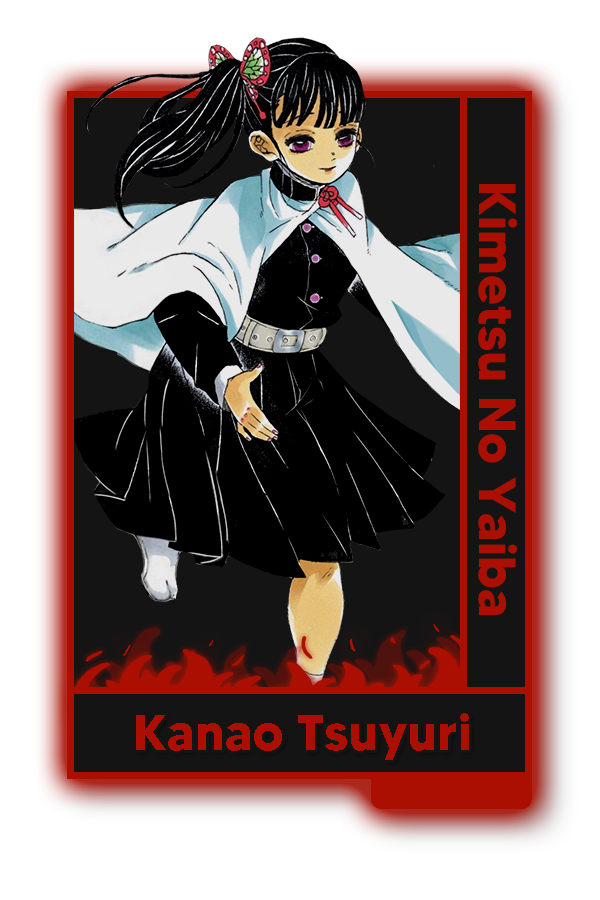
<style>
.page{position:relative;width:600px;height:900px;background:#141414}
.page>*{position:absolute;margin:0}
.t1{font:52px "MADETOMMY-Bold";color:#ab0f01}
.t2{font:50.5px "MADETOMMY-Bold";color:#ab0f01}
</style>
<div class="page">
<p class="t1" style="left:478px;top:184px;width:40px;height:431px;rotate:90deg">Kimetsu No Yaiba</p>
<p class="t2" style="left:136px;top:713px;width:333px;height:47px">Kanao Tsuyuri</p>
</div>
